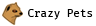
<style>
.page{position:relative;width:96px;height:26px;background:#ffffff}
.page>*{position:absolute;margin:0}
.t1{font:10.9px "FiraCode-Regular";color:#000000}
</style>
<div class="page">
<p class="t1" style="left:28px;top:9px;width:65px;height:11px">Crazy Pets</p>
</div>
